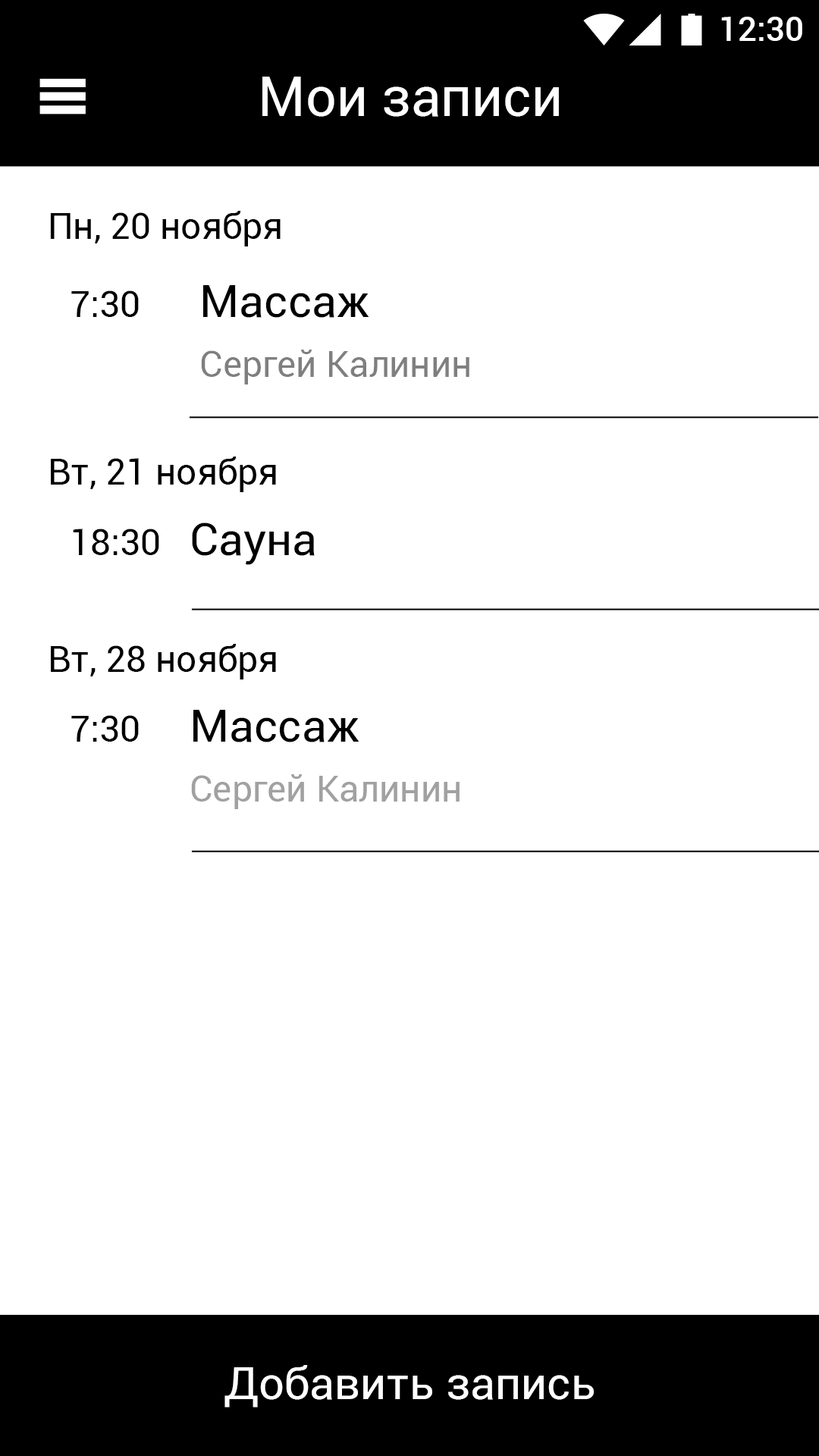
<style>
.page{position:relative;width:819px;height:1456px;background:#ffffff}
.page>*{position:absolute;margin:0}
.t1{font:33.4px "Roboto-Medium";color:#ffffff}
.t2{font:54.6px "Roboto-Regular";color:#ffffff}
.t3{font:36.4px "Roboto-Regular";color:#000000}
.t4{font:45.5px "Roboto-Regular";color:#000000}
.t5{font:36.4px "Roboto-Regular";color:#7f7f7f}
.t6{font:36.4px "Roboto-Regular";color:#a1a1a1}
.t7{font:45.5px "Roboto-Regular";color:#ffffff}
</style>
<div class="page">
<p class="t1" style="left:721px;top:17px;width:81px;height:24px">12:30</p>
<p class="t2" style="left:262px;top:77px;width:297px;height:40px">Мои записи</p>
<p class="t3" style="left:50px;top:211px;width:231px;height:35px">Пн, 20 ноября</p>
<p class="t3" style="left:71px;top:290px;width:68px;height:27px">7:30</p>
<p class="t4" style="left:203px;top:285px;width:166px;height:33px">Массаж</p>
<p class="t5" style="left:201px;top:350px;width:268px;height:34px">Сергей Калинин</p>
<p class="t3" style="left:51px;top:457px;width:225px;height:35px">Вт, 21 ноября</p>
<p class="t3" style="left:73px;top:529px;width:86px;height:26px">18:30</p>
<p class="t4" style="left:192px;top:522px;width:123px;height:43px">Сауна</p>
<p class="t3" style="left:51px;top:644px;width:225px;height:35px">Вт, 28 ноября</p>
<p class="t4" style="left:193px;top:710px;width:166px;height:32px">Массаж</p>
<p class="t3" style="left:71px;top:715px;width:68px;height:27px">7:30</p>
<p class="t6" style="left:191px;top:774px;width:269px;height:35px">Сергей Калинин</p>
<p class="t7" style="left:224px;top:1365px;width:370px;height:42px">Добавить запись</p>
</div>
